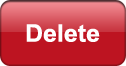
<style>
.page{position:relative;width:126px;height:66px;background:#bd1421}
.page>*{position:absolute;margin:0}
.t1{font:24.2px "Arial-BoldMT";color:#ffffff;scale:1.03 1}
</style>
<div class="page">
<p class="t1" style="left:26px;top:24px;width:74px;height:18px">Delete</p>
</div>
